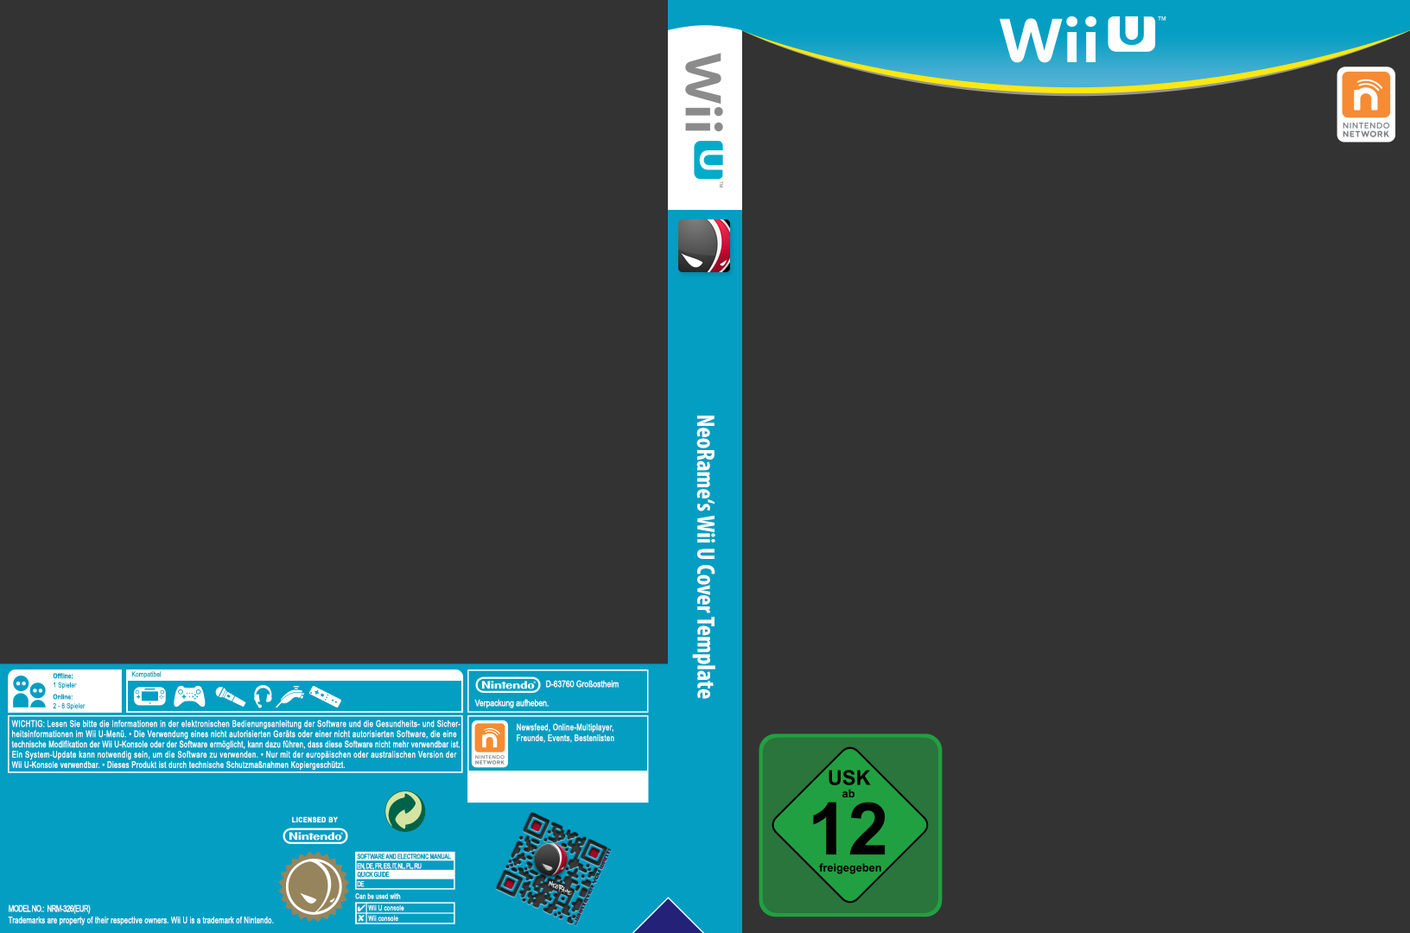
<style>
.page{position:relative;width:1410px;height:933px;background:#333333}
.page>*{position:absolute;margin:0}
.t1{font:25.4px "MyriadPro-BoldCond";color:#ffffff}
.t2{font:7.2px/9px "ArialNarrow";color:#049ec2}
.t3{font:7.2px/9px "Arial-BoldMT";color:#049ec2;scale:0.8 1}
.t4{font:7.2px/11.9px "Arial-BoldMT";color:#049ec2;scale:0.8 1}
.t5{font:7.2px "ArialNarrow";color:#049ec2}
.t6{font:9px "ArialNarrow";color:#ffffff}
.t7{font:9px/10.3px "ArialNarrow";letter-spacing:0.05em;color:#ffffff;scale:0.9 1}
.t8{font:9px/10.3px "ArialNarrow";letter-spacing:0.04em;color:#ffffff;scale:0.9 1}
.t9{font:9px/10.3px "ArialNarrow";letter-spacing:0.035em;color:#ffffff;scale:0.9 1}
.t10{font:9px/10.3px "ArialNarrow";letter-spacing:0.055em;color:#ffffff;scale:0.9 1}
.t11{font:9px/10.8px "ArialNarrow";letter-spacing:0.04em;color:#ffffff;scale:0.9 1}
.t12{font:7.2px "Arial-BoldMT";letter-spacing:0.08em;color:#ffffff;scale:0.84 1}
.t13{font:7.2px "ArialNarrow";letter-spacing:0.04em;color:#ffffff;scale:0.9 1}
.t14{font:9px/11.5px "ArialNarrow";letter-spacing:0.02em;color:#ffffff;scale:0.9 1}
.t15{font:9px/11.5px "ArialNarrow";letter-spacing:-0.04em;color:#ffffff;scale:0.9 1}
.t16{font:7.2px/10.4px "ArialNarrow";letter-spacing:0.04em;color:#ffffff;scale:0.9 1}
</style>
<div class="page">
<p class="t1" style="left:692px;top:416px;width:23px;height:283px;rotate:90deg">NeoRame‘s Wii U Cover Template</p>
<p class="t2" style="left:53px;top:673px;width:33px;height:37px"><span class="t3">Offline:<br></span>1 Spieler<br><span class="t4">Online:<br></span>2 - 8 Spieler</p>
<p class="t5" style="left:131px;top:671px;width:31px;height:7px">Kompatibel</p>
<p class="t6" style="left:546px;top:680px;width:73px;height:8px">D-63760 Großostheim</p>
<p class="t6" style="left:474px;top:699px;width:75px;height:9px">Verpackung aufheben.</p>
<p class="t7" style="left:11px;top:720px;width:450px;height:51px"><span class="t8">WICHTIG: </span>Lesen Sie bitte die Informationen in der elektronischen Bedienungsanleitung der Software und die Gesundheits- und Sicher-<br>heitsinformationen im Wii U-Menü. • Die Verwendung eines nicht autorisierten Geräts oder einer nicht autorisierten Software, die eine<br><span class="t9">technische Modifikation der Wii U-Konsole oder der Software ermöglicht, kann dazu führen, dass diese Software nicht mehr verwendbar ist</span><span class="t8">.<br></span><span class="t10">Ein System-Update kann notwendig sein, um die Software zu verwenden. • Nur mit der europäischen oder australischen Version der<br></span><span class="t8">Wii U-Konsole verwendbar. • Dieses Produkt ist durch technische Schutzmaßnahmen Kopiergeschützt.</span></p>
<p class="t11" style="left:517px;top:723px;width:97px;height:20px">Newsfeed, Online-Multiplayer,<br>Freunde, Events, Bestenlisten</p>
<p class="t12" style="left:292px;top:816px;width:46px;height:7px">LICENSED BY</p>
<p class="t13" style="left:355px;top:893px;width:46px;height:6px">Can be used with</p>
<p class="t14" style="left:8px;top:905px;width:266px;height:20px"><span class="t15">MODEL NO.:  NRM-326(EUR)<br></span>Trademarks are property of their respective owners. Wii U is a trademark of Nintendo.</p>
<p class="t16" style="left:368px;top:905px;width:36px;height:16px">Wii U console<br>Wii console</p>
</div>
